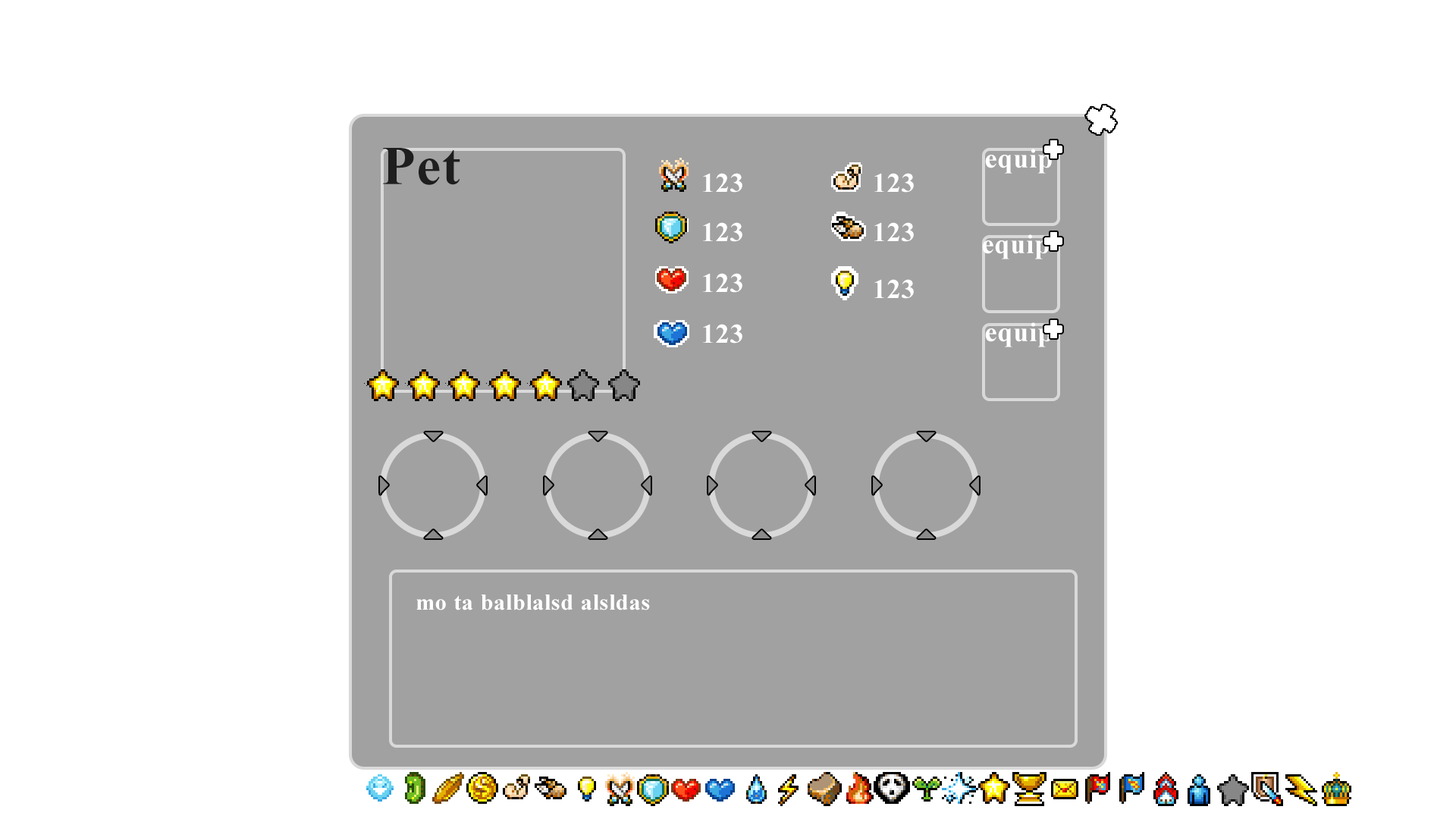
<style>
.page{position:relative;width:1456px;height:819px;background:#ffffff}
.page>*{position:absolute;margin:0}
.t1{font:54.6px "TimesNewRomanPS-BoldMT";letter-spacing:0.025em;color:#1e1e1e}
.t2{font:27.3px "TimesNewRomanPS-BoldMT";letter-spacing:0.025em;color:#ffffff}
.t3{font:22.7px "TimesNewRomanPS-BoldMT";letter-spacing:0.025em;color:#ffffff}
</style>
<div class="page">
<p class="t1" style="left:383px;top:148px;width:77px;height:37px">Pet</p>
<p class="t2" style="left:985px;top:149px;width:67px;height:25px">equip</p>
<p class="t2" style="left:703px;top:173px;width:39px;height:20px">123</p>
<p class="t2" style="left:874px;top:173px;width:40px;height:20px">123</p>
<p class="t2" style="left:703px;top:222px;width:39px;height:20px">123</p>
<p class="t2" style="left:874px;top:222px;width:40px;height:20px">123</p>
<p class="t2" style="left:982px;top:234px;width:67px;height:25px">equip</p>
<p class="t2" style="left:703px;top:273px;width:39px;height:20px">123</p>
<p class="t2" style="left:874px;top:279px;width:40px;height:20px">123</p>
<p class="t2" style="left:703px;top:324px;width:39px;height:20px">123</p>
<p class="t2" style="left:985px;top:322px;width:67px;height:25px">equip</p>
<p class="t3" style="left:416px;top:595px;width:234px;height:15px">mo ta balblalsd alsldas</p>
</div>
